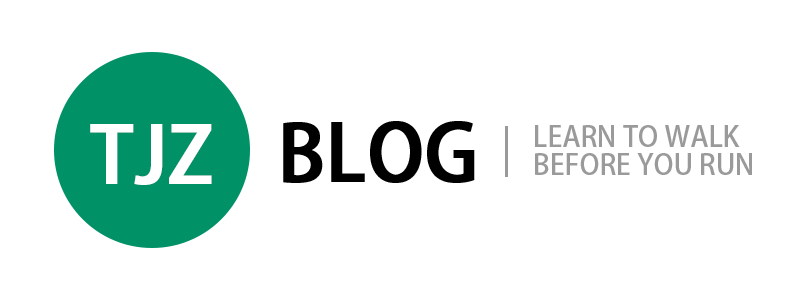
<style>
.page{position:relative;width:800px;height:300px;background:#ffffff}
.page>*{position:absolute;margin:0}
.t1{font:76.4px "AdobeHeitiStd-Regular";color:#ffffff;font-weight:bold}
.t2{font:76.4px "AdobeHeitiStd-Regular";color:#000000;font-weight:bold}
.t3{font:27.8px/27.8px "AdobeHeitiStd-Regular";color:#9a9a9a}
</style>
<div class="page">
<p class="t1" style="left:90px;top:124px;width:122px;height:61px">TJZ</p>
<p class="t2" style="left:283px;top:121px;width:192px;height:62px">BLOG</p>
<p class="t3" style="left:535px;top:125px;width:217px;height:50px">LEARN TO WALK<br>BEFORE YOU RUN</p>
</div>
